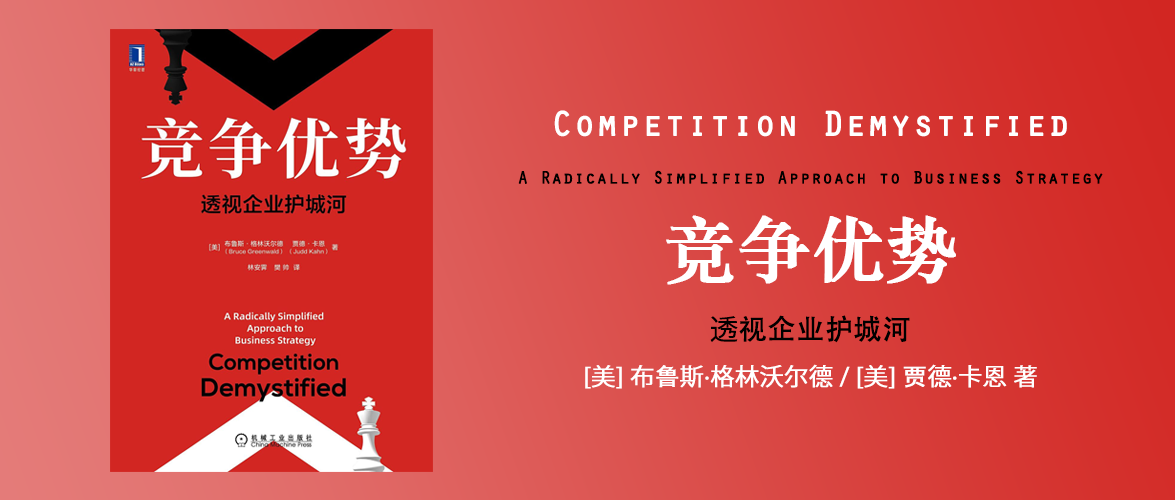
<style>
.page{position:relative;width:1175px;height:500px}
.page>*{position:absolute;margin:0}
.t1{font:18px "OratorStd";color:#000000;font-weight:bold}
.t2{font:36px "OratorStd";color:#ffffff;font-weight:bold}
.t3{font:72px "STZhongsong";color:#ffffff;font-weight:bold}
.t4{font:28px "AdobeHeitiStd-Regular";color:#000000;font-weight:bold}
.t5{font:28px "KozGoPr6N-Regular";color:#000000;font-weight:bold}
.t6{font:24px "KozGoPr6N-Regular";color:#ffffff;font-weight:bold}
.t7{font:24px "AdobeHeitiStd-Regular";color:#ffffff;font-weight:bold}
</style>
<div class="page">
<p class="t1" style="left:518px;top:110px;width:585px;height:74px;text-align:center"><span class="t2">Competition Demystified<br></span>A Radically Simplified Approach to Business Strategy</p>
<p class="t3" style="left:666px;top:215px;width:290px;height:70px">竞争优势</p>
<p class="t4" style="left:710px;top:315px;width:200px;height:28px"><span class="t5">透</span>视企业护城河</p>
<p class="t6" style="left:585px;top:364px;width:452px;height:25px">[美] 布<span class="t7">鲁</span>斯·格林沃尔德 / [美] <span class="t7">贾</span>德·卡恩 著</p>
</div>
